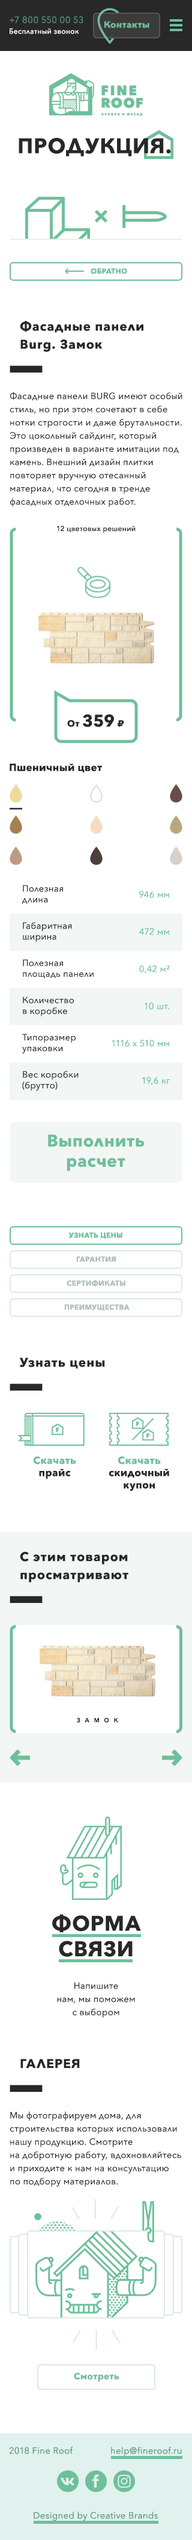
<style>
.page{position:relative;width:192px;height:2540px;background:#ffffff}
.page>*{position:absolute;margin:0}
.t1{font:9px "AvenirNext-Regular";letter-spacing:0.025em;color:#559777}
.t2{font:7.2px "AvenirNext-Medium";letter-spacing:0.025em;color:#ffffff}
.t3{font:9px "AvenirNext-Bold";letter-spacing:0.025em;color:#6ebf9b}
.t4{font:21px "AvenirNext-Bold";letter-spacing:0.05em;color:#282828;text-transform:uppercase}
.t5{font:7.2px "AvenirNext-Bold";letter-spacing:0.025em;color:#6ebf9b;text-transform:uppercase}
.t6{font:12.6px/18px "AvenirNext-Bold";letter-spacing:0.05em;color:#272727}
.t7{font:9px/13.2px "AvenirNext-Regular";letter-spacing:0.025em;color:#272727}
.t8{font:7.2px "AvenirNext-Medium";letter-spacing:0.025em;color:#272727}
.t9{font:16.8px "AvenirNext-Bold";letter-spacing:0.025em;color:#272727}
.t10{font:9px "AvenirNext-Bold";letter-spacing:0.025em;color:#272727}
.t11{font:9px "Geometria-ExtraBold";letter-spacing:0.025em;color:#272727}
.t12{font:10.2px "AvenirNext-Bold";letter-spacing:0.025em;color:#282828}
.t13{font:9px "AvenirNext-Regular";letter-spacing:0.025em;color:#272727}
.t14{font:9px "AvenirNext-Regular";letter-spacing:0.025em;color:#6ebf9b}
.t15{font:16.8px "AvenirNext-Bold";letter-spacing:0.025em;color:#6ebf9b}
.t16{font:7.2px "AvenirNext-Bold";letter-spacing:0.025em;color:#aebfb9;text-transform:uppercase}
.t17{font:12.6px "AvenirNext-Bold";letter-spacing:0.05em;color:#272727}
.t18{font:10.2px "AvenirNext-Bold";letter-spacing:0.025em;color:#6ebf9b}
.t19{font:6px "AvenirNext-DemiBold";letter-spacing:0.765em;color:#272727}
.t20{font:21px/25.5px "AvenirNext-Bold";letter-spacing:0.05em;color:#282828;text-transform:uppercase}
.t21{font:9px/13.2px "AvenirNext-Regular";letter-spacing:0.025em;color:#282828}
.t22{font:12.6px "AvenirNext-Bold";letter-spacing:0.05em;color:#272727;text-transform:uppercase}
</style>
<div class="page">
<p class="t1" style="left:10px;top:16px;width:73px;height:7px">+7 800 550 00 53</p>
<p class="t2" style="left:10px;top:28px;width:69px;height:6px">Бесплатный звонок</p>
<p class="t3" style="left:104px;top:21px;width:45px;height:7px">Контакты</p>
<p class="t4" style="left:19px;top:137px;width:152px;height:20px">продукция.</p>
<p class="t5" style="left:91px;top:268px;width:36px;height:6px">обратно</p>
<p class="t6" style="left:20px;top:321px;width:123px;height:31px">Фасадные панели <br>Burg. Замок</p>
<p class="t7" style="left:10px;top:392px;width:172px;height:115px">Фасадные панели BURG имеют особый <br>стиль, но при этом сочетают в себе <br>нотки строгости и даже брутальности. <br>Это цокольный сайдинг, который <br>произведен в варианте имитации под <br>камень. Внешний дизайн плитки <br>повторяет вручную отесанный <br>материал, что сегодня в тренде <br>фасадных отделочных работ.</p>
<p class="t8" style="left:56px;top:526px;width:80px;height:7px">12 цветовых решений</p>
<p class="t9" style="left:67px;top:714px;width:57px;height:13px"><span class="t10">От </span>359 <span class="t11">₽</span></p>
<p class="t12" style="left:10px;top:764px;width:92px;height:9px">Пшеничный цвет</p>
<p class="t13" style="left:22px;top:885px;width:41px;height:19px">Полезная <br>длина</p>
<p class="t14" style="left:139px;top:891px;width:30px;height:7px">946 мм</p>
<p class="t13" style="left:23px;top:922px;width:49px;height:20px">Габаритная <br>ширина</p>
<p class="t14" style="left:139px;top:928px;width:30px;height:7px">472 мм</p>
<p class="t13" style="left:23px;top:959px;width:71px;height:20px">Полезная <br>площадь панели</p>
<p class="t14" style="left:139px;top:965px;width:31px;height:9px">0,42 м²</p>
<p class="t13" style="left:23px;top:997px;width:51px;height:19px">Количество <br>в коробке</p>
<p class="t14" style="left:145px;top:1003px;width:24px;height:7px">10 шт.</p>
<p class="t13" style="left:22px;top:1034px;width:54px;height:20px">Типоразмер <br>упаковки</p>
<p class="t14" style="left:112px;top:1040px;width:57px;height:7px">1116 x 510 мм</p>
<p class="t13" style="left:22px;top:1071px;width:57px;height:20px">Вес коробки <br>(брутто)</p>
<p class="t14" style="left:142px;top:1077px;width:28px;height:8px">19,6 кг</p>
<p class="t15" style="left:48px;top:1135px;width:97px;height:36px;text-align:center">Выполнить<br>расчет</p>
<p class="t5" style="left:68px;top:1232px;width:54px;height:7px">Узнать цены</p>
<p class="t16" style="left:76px;top:1256px;width:40px;height:6px">гарантия</p>
<p class="t16" style="left:67px;top:1280px;width:58px;height:7px">сертификаты</p>
<p class="t16" style="left:64px;top:1304px;width:66px;height:7px">преимущества</p>
<p class="t17" style="left:19px;top:1358px;width:86px;height:11px">Узнать цены</p>
<p class="t18" style="left:33px;top:1456px;width:43px;height:23px;text-align:center">Скачать<br><span class="t12">прайс</span></p>
<p class="t12" style="left:109px;top:1456px;width:60px;height:36px;text-align:center"><span class="t18">Скачать<br></span>скидочный<br>купон</p>
<p class="t6" style="left:20px;top:1552px;width:108px;height:31px">С этим товаром <br>просматривают</p>
<p class="t19" style="left:77px;top:1718px;width:41px;height:5px">ЗАМОК</p>
<p class="t20" style="left:52px;top:1915px;width:89px;height:42px;text-align:center">ФОРМА<br>СВЯЗИ</p>
<p class="t21" style="left:57px;top:1982px;width:78px;height:36px;text-align:center">Напишите<br>нам, мы поможем<br>с выбором</p>
<p class="t22" style="left:20px;top:2059px;width:60px;height:10px">ГАЛЕРЕЯ</p>
<p class="t7" style="left:10px;top:2111px;width:171px;height:76px">Мы фотографируем дома, для <br>строительства которых использовали <br>нашу продукцию. Смотрите <br>на добротную работу, вдохновляйтесь <br>и приходите к нам на консультацию <br>по подбору материалов.</p>
<p class="t3" style="left:74px;top:2373px;width:45px;height:9px">Смотреть</p>
<p class="t1" style="left:9px;top:2447px;width:64px;height:8px">2018 Fine Roof</p>
<p class="t1" style="left:111px;top:2447px;width:71px;height:9px">help@fineroof.ru</p>
<p class="t1" style="left:34px;top:2512px;width:124px;height:9px">Designed by Creative Brands</p>
</div>
